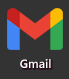
<style>
.page{position:relative;width:69px;height:79px;background:#333333}
.page>*{position:absolute;margin:0}
.t1{font:12px "SegoeUI-Semibold";color:#ffffff}
</style>
<div class="page">
<p class="t1" style="left:20px;top:59px;width:31px;height:9px">Gmail</p>
</div>
